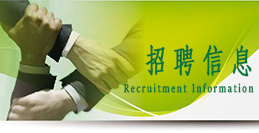
<style>
.page{position:relative;width:259px;height:133px}
.page>*{position:absolute;margin:0}
.t1{font:31.8px "HYSWLongFangSong";letter-spacing:0.18em;color:#08743e;font-weight:bold}
.t2{font:12.7px "SitkaBanner";letter-spacing:0.18em;color:#08743e;font-weight:bold;scale:0.73 1}
</style>
<div class="page">
<p class="t1" style="left:145px;top:44px;width:107px;height:33px">招聘信息</p>
<p class="t2" style="left:123px;top:83px;width:131px;height:10px">Recruitment Information</p>
</div>
